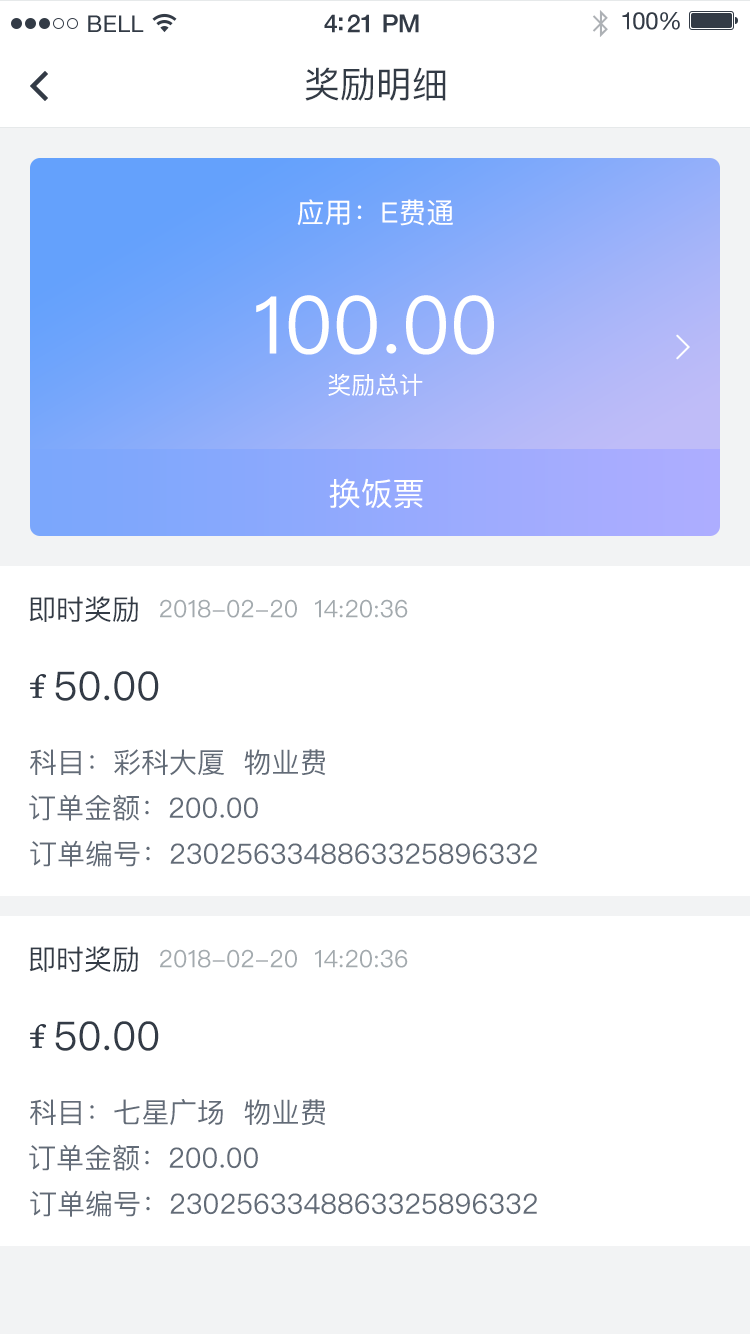
<style>
.page{position:relative;width:750px;height:1334px;background:#ffffff}
.page>*{position:absolute;margin:0}
.t1{font:23px "HelveticaNeue";letter-spacing:0.02em;color:#333b46}
.t2{font:25px "HelveticaNeue-Medium";letter-spacing:-0.02em;color:#333b46}
.t3{font:24px "HelveticaNeue";letter-spacing:-0.02em;color:#333b46}
.t4{font:36px "PingFangSC-Regular";color:#333b46}
.t5{font:28px "PingFangSC-Regular";color:#ffffff}
.t6{font:80px "PingFangSC-Regular";color:#ffffff}
.t7{font:24px "PingFangSC-Regular";color:#ffffff}
.t8{font:32px "PingFangSC-Regular";color:#ffffff}
.t9{font:28px "PingFangSC-Regular";color:#333b46}
.t10{font:24px "PingFangSC-Regular";color:#a3aaae}
.t11{font:40px "PingFangSC-Regular";color:#333b46}
.t12{font:28px "PingFangSC-Regular";color:#626b77}
</style>
<div class="page">
<p class="t1" style="left:88px;top:15px;width:56px;height:17px">BELL</p>
<p class="t2" style="left:324px;top:14px;width:95px;height:19px">4:21 PM</p>
<p class="t3" style="left:622px;top:12px;width:58px;height:18px">100%</p>
<p class="t4" style="left:305px;top:67px;width:141px;height:34px">奖励明细</p>
<p class="t5" style="left:297px;top:199px;width:156px;height:27px">应用：E费通</p>
<p class="t6" style="left:256px;top:295px;width:238px;height:60px">100.00</p>
<p class="t7" style="left:328px;top:373px;width:95px;height:23px">奖励总计</p>
<p class="t8" style="left:329px;top:478px;width:94px;height:31px">换饭票</p>
<p class="t9" style="left:29px;top:596px;width:109px;height:26px">即时奖励</p>
<p class="t10" style="left:160px;top:599px;width:248px;height:19px">2018-02-20  14:20:36</p>
<p class="t11" style="left:55px;top:671px;width:104px;height:30px">50.00</p>
<p class="t12" style="left:30px;top:749px;width:296px;height:27px">科目：彩科大厦  物业费</p>
<p class="t12" style="left:29px;top:794px;width:229px;height:27px">订单金额：200.00</p>
<p class="t12" style="left:30px;top:840px;width:507px;height:27px">订单编号：2302563348863325896332</p>
<p class="t9" style="left:29px;top:946px;width:109px;height:26px">即时奖励</p>
<p class="t10" style="left:160px;top:949px;width:248px;height:19px">2018-02-20  14:20:36</p>
<p class="t11" style="left:55px;top:1021px;width:104px;height:30px">50.00</p>
<p class="t12" style="left:30px;top:1099px;width:296px;height:27px">科目：七星广场  物业费</p>
<p class="t12" style="left:29px;top:1144px;width:229px;height:27px">订单金额：200.00</p>
<p class="t12" style="left:30px;top:1190px;width:507px;height:27px">订单编号：2302563348863325896332</p>
</div>
